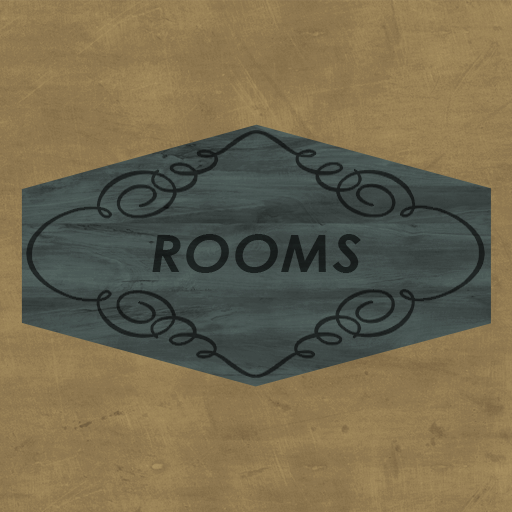
<style>
.page{position:relative;width:512px;height:512px}
.page>*{position:absolute;margin:0}
.t1{font:52px "CenturyGothic-BoldItalic";letter-spacing:0.025em;color:#191f1d;text-transform:uppercase;scale:1.07 1}
</style>
<div class="page">
<p class="t1" style="left:152px;top:234px;width:209px;height:39px">rooms</p>
</div>
